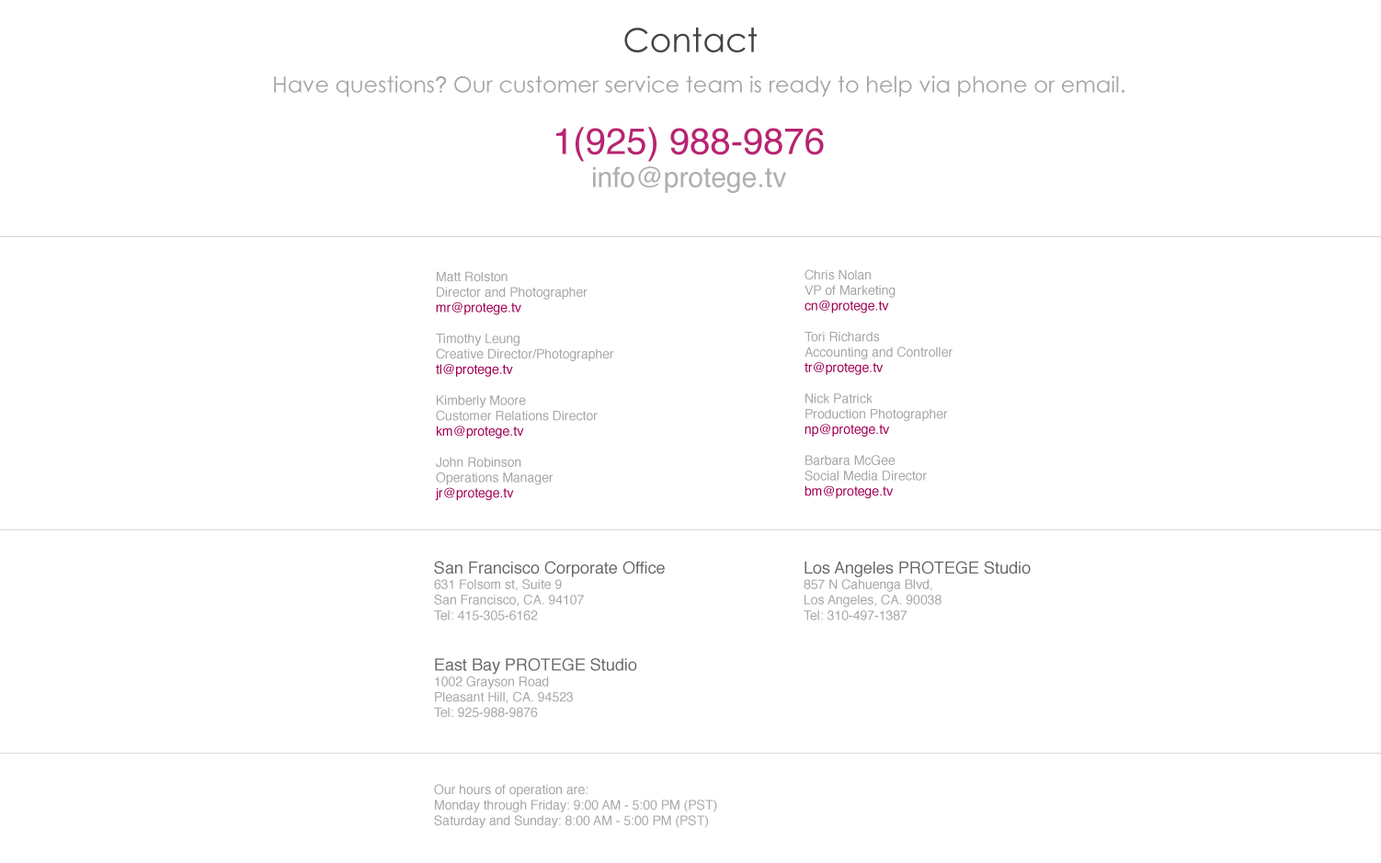
<style>
.page{position:relative;width:1381px;height:863px;background:#ffffff}
.page>*{position:absolute;margin:0}
.t1{font:22.1px "CenturyGothic";color:#a6a6a6}
.t2{font:22.1px "ArialMT";color:#a6a6a6}
.t3{font:36.8px "Helvetica";color:#b82471}
.t4{font:27.6px "Helvetica";color:#afafaf}
.t5{font:12.9px "Helvetica";color:#a6a6a6}
.t6{font:12.9px "Helvetica";color:#a00053}
.t7{font:16.6px "Helvetica";color:#666566}
</style>
<div class="page">
<p class="t1" style="left:274px;top:75px;width:851px;height:22px">Have questions<span class="t2">?</span> Our customer service team is ready to help via phone or email.</p>
<p class="t3" style="left:556px;top:127px;width:268px;height:66px">1(925) 988-9876<br>     <span class="t4">info@protege.tv</span></p>
<p class="t5" style="left:805px;top:269px;width:148px;height:230px">Chris Nolan<br>VP of Marketing<br><span class="t6">cn@protege.tv<br></span><br>Tori Richards<br>Accounting and Controller<br><span class="t6">tr@protege.tv<br><br></span>Nick Patrick<br>Production Photographer<br><span class="t6">np@protege.tv<br></span><br>Barbara McGee<br>Social Media Director<br><span class="t6">bm@protege.tv</span></p>
<p class="t5" style="left:435px;top:271px;width:179px;height:230px">Matt Rolston<br>Director and Photographer<br><span class="t6">mr@protege.tv<br><br></span>Timothy Leung<br>Creative Director/Photographer<br><span class="t6">tl@protege.tv<br></span><br>Kimberly Moore<br>Customer Relations Director<br><span class="t6">km@protege.tv<br><br></span>John Robinson<br>Operations Manager<br><span class="t6">jr@protege.tv</span></p>
<p class="t5" style="left:434px;top:561px;width:283px;height:267px"><span class="t7">San Francisco Corporate Office<br></span>631 Folsom st, Suite 9<br>San Francisco, CA. 94107<br>Tel: 415-305-6162<br><br><br><span class="t7">East Bay PROTEGE Studio<br></span>1002 Grayson Road<br>Pleasant Hill, CA. 94523<br>Tel: 925-988-9876<br><br><br><br><br>Our hours of operation are:<br>Monday through Friday: 9:00 AM - 5:00 PM (PST)<br>Saturday and Sunday: 8:00 AM - 5:00 PM (PST)</p>
<p class="t5" style="left:804px;top:561px;width:227px;height:60px"><span class="t7">Los Angeles PROTEGE Studio<br></span>857 N Cahuenga Blvd, <br>Los Angeles, CA. 90038<br>Tel: 310-497-1387</p>
</div>
